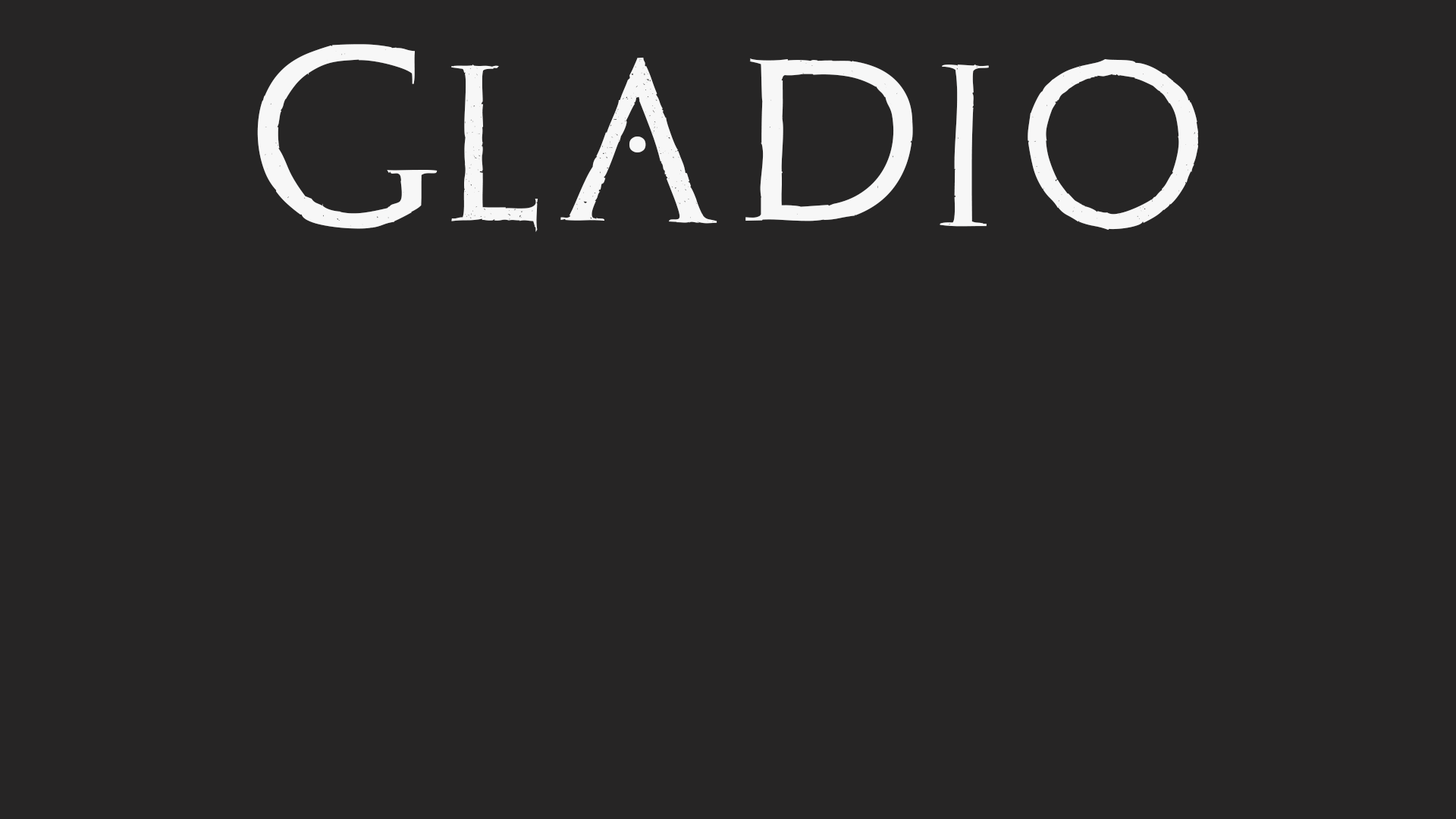
<style>
.page{position:relative;width:1456px;height:819px;background:#262525}
.page>*{position:absolute;margin:0}
.t1{font:189.6px "Archeologicaps";color:#f7f7f7}
</style>
<div class="page">
<p class="t1" style="left:257px;top:44px;width:941px;height:188px">Gladio</p>
</div>
